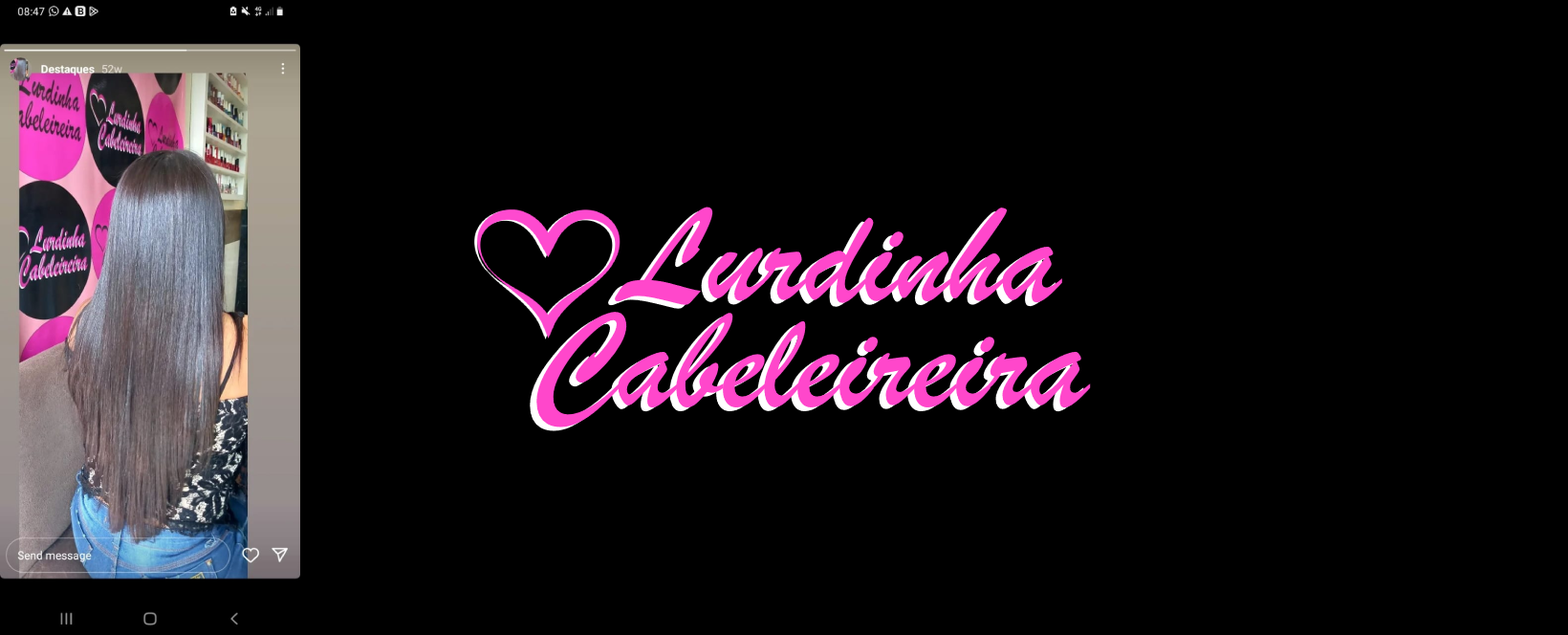
<style>
.page{position:relative;width:1568px;height:635px;background:#000000}
.page>*{position:absolute;margin:0}
.t1{font:143.4px "BrushScriptMT";color:#ff47cb}
</style>
<div class="page">
<p class="t1" style="left:615px;top:207px;width:447px;height:99px">Lurdinha</p>
<p class="t1" style="left:536px;top:312px;width:555px;height:115px">Cabeleireira</p>
</div>
